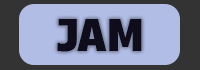
<style>
.page{position:relative;width:200px;height:70px;background:#b1bde5}
.page>*{position:absolute;margin:0}
.t1{font:43.1px "HeadingNowTrial-66Bold";color:#0f0d1c}
</style>
<div class="page">
<p class="t1" style="left:57px;top:19px;width:85px;height:33px">JAM</p>
</div>
